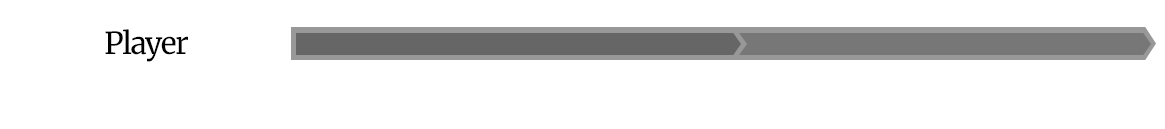
<style>
.page{position:relative;width:1165px;height:129px;background:#ffffff}
.page>*{position:absolute;margin:0}
.t1{font:30px "Merriweather-Regular";letter-spacing:-0.06em;color:#000000}
</style>
<div class="page">
<p class="t1" style="left:105px;top:29px;width:83px;height:33px">Player</p>
</div>
